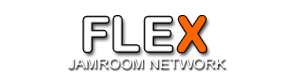
<style>
.page{position:relative;width:300px;height:75px;background:#ffffff}
.page>*{position:absolute;margin:0}
.t1{font:48px "ArialRoundedMTBold";color:#ff6600;font-weight:bold}
.t2{font:14px "ArialMT";color:#ffffff;scale:1.07 1}
</style>
<div class="page">
<p class="t1" style="left:177px;top:16px;width:30px;height:37px">X</p>
<p class="t2" style="left:68px;top:57px;width:158px;height:12px">JAMROOM NETWORK</p>
</div>
